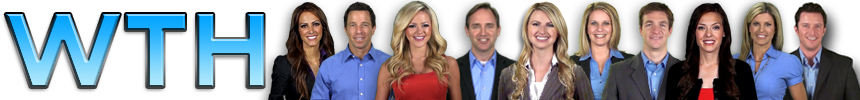
<style>
.page{position:relative;width:860px;height:100px}
.page>*{position:absolute;margin:0}
.t1{font:94px "TYPOGRAPHPRO-ExtraBold"}
</style>
<div class="page">
<p class="t1" style="left:5px;top:14px;width:259px;height:73px">WTH</p>
</div>
